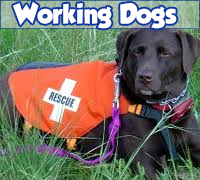
<style>
.page{position:relative;width:200px;height:180px}
.page>*{position:absolute;margin:0}
.t1{font:24.3px "GROBOLD";color:#ffffff}
</style>
<div class="page">
<p class="t1" style="left:13px;top:1px;width:164px;height:28px">Working Dogs</p>
</div>
